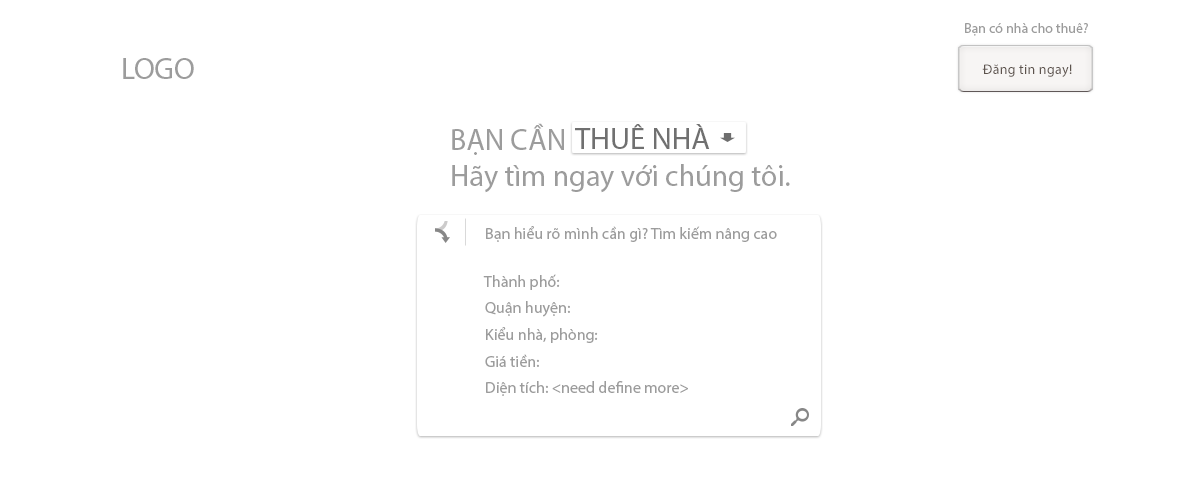
<style>
.page{position:relative;width:1200px;height:500px;background:#ffffff}
.page>*{position:absolute;margin:0}
.t1{font:14px "Tahoma";color:#9c9c9c}
.t2{font:30px "MyriadPro-Regular";color:#9c9c9c}
.t3{font:14px "MyriadPro-Regular";letter-spacing:0.02em;color:#5d534d}
.t4{font:30px "Tahoma";color:#9c9c9c}
.t5{font:30px "Tahoma";color:#707070}
.t6{font:16px "MyriadPro-Regular";color:#9c9c9c}
</style>
<div class="page">
<p class="t1" style="left:965px;top:23px;width:123px;height:13px">Bạn có nhà cho thuê?</p>
<p class="t2" style="left:123px;top:58px;width:71px;height:21px">LOGO</p>
<p class="t3" style="left:982px;top:64px;width:90px;height:13px">Đăng tin ngay!</p>
<p class="t4" style="left:452px;top:123px;width:338px;height:70px">BẠN CẦN <br>Hãy tìm ngay với chúng tôi.</p>
<p class="t5" style="left:575px;top:124px;width:135px;height:25px">THUÊ NHÀ</p>
<p class="t6" style="left:486px;top:226px;width:291px;height:16px">Bạn hiểu rõ mình cần gì? Tìm kiếm nâng cao</p>
<p class="t6" style="left:483px;top:274px;width:77px;height:16px">Thành phố:</p>
<p class="t6" style="left:485px;top:301px;width:85px;height:16px">Quận huyện:</p>
<p class="t6" style="left:486px;top:327px;width:112px;height:16px">Kiểu nhà, phòng:</p>
<p class="t6" style="left:485px;top:354px;width:54px;height:13px">Giá tiền:</p>
<p class="t6" style="left:486px;top:381px;width:202px;height:15px">Diện tích: &lt;need define more&gt;</p>
</div>
